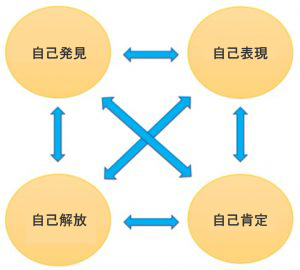
<style>
.page{position:relative;width:300px;height:270px;background:#ffffff}
.page>*{position:absolute;margin:0}
.t1{font:14px "MS-Gothic";color:#323232}
</style>
<div class="page">
<p class="t1" style="left:33px;top:46px;width:54px;height:14px">自己発見</p>
<p class="t1" style="left:214px;top:46px;width:54px;height:14px">自己表現</p>
<p class="t1" style="left:33px;top:213px;width:54px;height:14px">自己解放</p>
<p class="t1" style="left:214px;top:213px;width:53px;height:14px">自己肯定</p>
</div>
